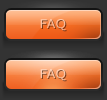
<style>
.page{position:relative;width:107px;height:100px}
.page>*{position:absolute;margin:0}
.t1{font:12px "Verdana";color:#fbc09f;scale:1.1 1}
.t2{font:12px "Verdana";color:#fccbaf;scale:1.1 1}
</style>
<div class="page">
<p class="t1" style="left:40px;top:19px;width:26px;height:12px">FAQ</p>
<p class="t2" style="left:40px;top:69px;width:26px;height:12px">FAQ</p>
</div>
